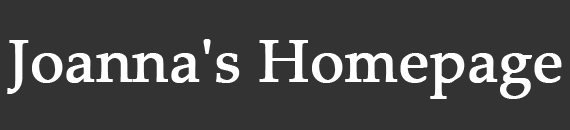
<style>
.page{position:relative;width:570px;height:130px;background:#333333}
.page>*{position:absolute;margin:0}
.t1{font:60px "PalatinoLinotype-Roman";color:#ffffff;font-weight:bold}
</style>
<div class="page">
<p class="t1" style="left:7px;top:39px;width:555px;height:60px">Joanna's Homepage</p>
</div>
